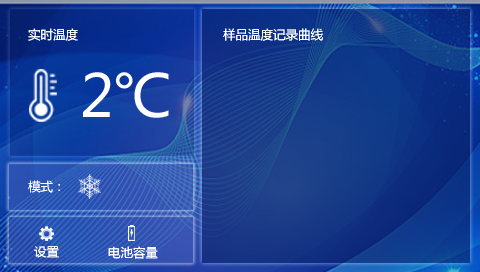
<style>
.page{position:relative;width:480px;height:272px}
.page>*{position:absolute;margin:0}
.t1{font:12.5px "MicrosoftYaHei";color:#ffffff}
.t2{font:58.3px "MicrosoftYaHei";color:#ffffff}
</style>
<div class="page">
<p class="t1" style="left:28px;top:28px;width:50px;height:13px">实时温度</p>
<p class="t1" style="left:223px;top:28px;width:100px;height:13px">样品温度记录曲线</p>
<p class="t2" style="left:83px;top:72px;width:86px;height:46px">2℃</p>
<p class="t1" style="left:28px;top:180px;width:32px;height:13px">模式：</p>
<p class="t1" style="left:34px;top:246px;width:25px;height:12px">设置</p>
<p class="t1" style="left:108px;top:246px;width:50px;height:13px">电池容量</p>
</div>
